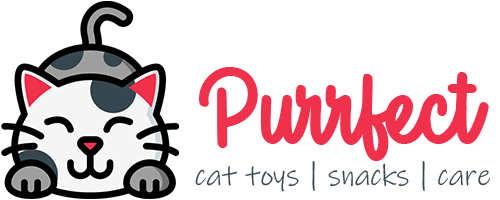
<style>
.page{position:relative;width:500px;height:200px;background:#ffffff}
.page>*{position:absolute;margin:0}
.t1{font:83px "Biscuit-&-Chocolat";color:#ef314c}
.t2{font:30px "InkFree";color:#37474f}
</style>
<div class="page">
<p class="t1" style="left:199px;top:67px;width:290px;height:94px">Purrfect</p>
<p class="t2" style="left:195px;top:161px;width:295px;height:31px">cat toys | snacks | care</p>
</div>
